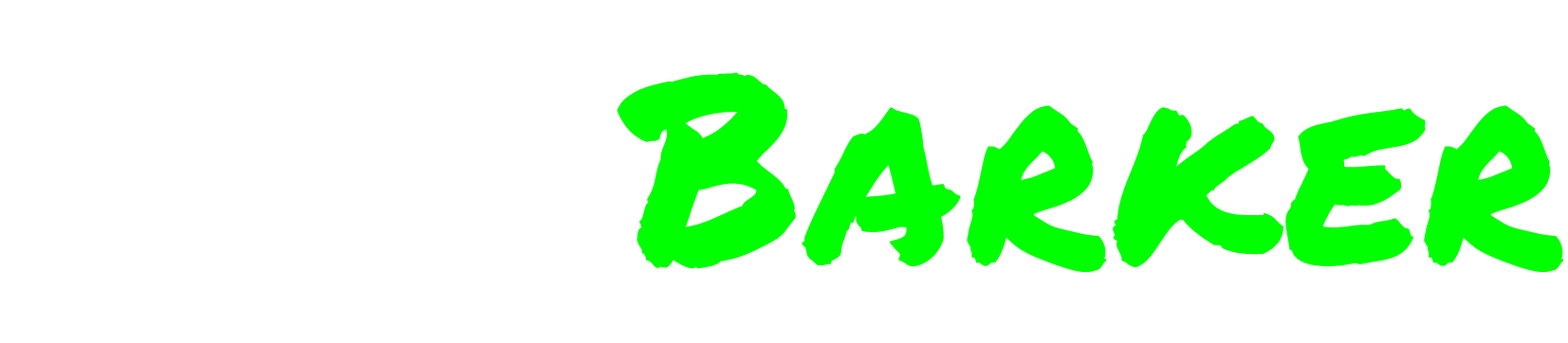
<style>
.page{position:relative;width:1568px;height:343px;background:#ffffff}
.page>*{position:absolute;margin:0}
.t1{font:256.9px "PermanentMarker-Regular";color:#00ff00;font-weight:bold}
.t2{font:256.9px "PermanentMarker-Regular";color:#ffffff;font-weight:bold}
</style>
<div class="page">
<p class="t1" style="left:23px;top:72px;width:1540px;height:200px"><span class="t2">Sean</span>Barker</p>
</div>
